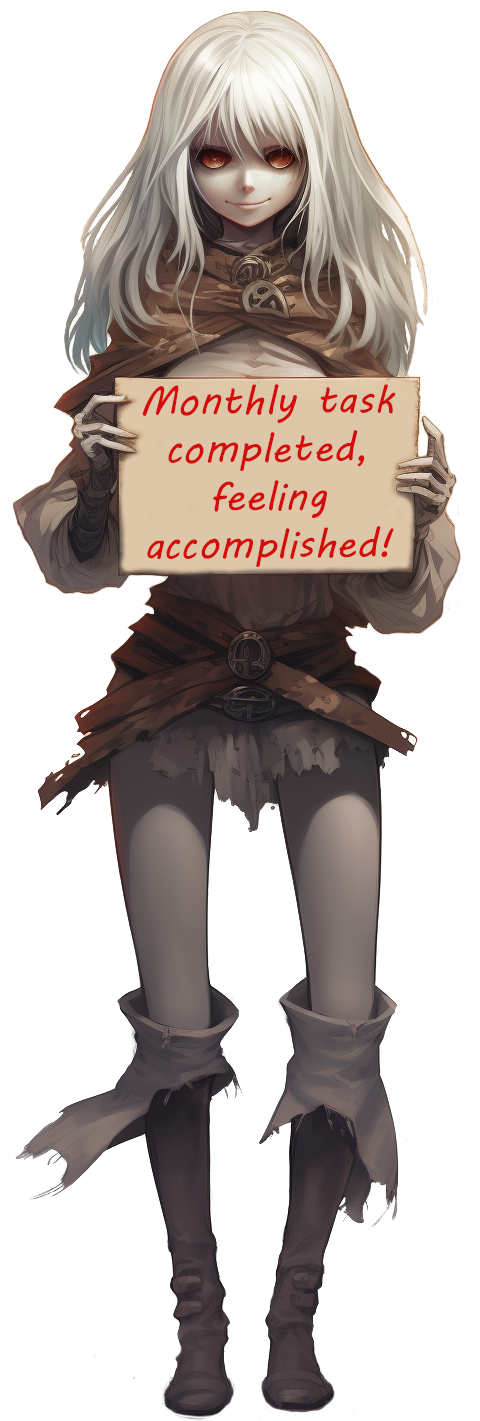
<style>
.page{position:relative;width:480px;height:1421px;background:#ffffff}
.page>*{position:absolute;margin:0}
.t1{font:40px "MVBoli";letter-spacing:0.006em;color:#d40c0c}
</style>
<div class="page">
<p class="t1" style="left:142px;top:384px;width:254px;height:183px;text-align:center;rotate:-1deg">Monthly task completed,<br>feeling accomplished!</p>
</div>
